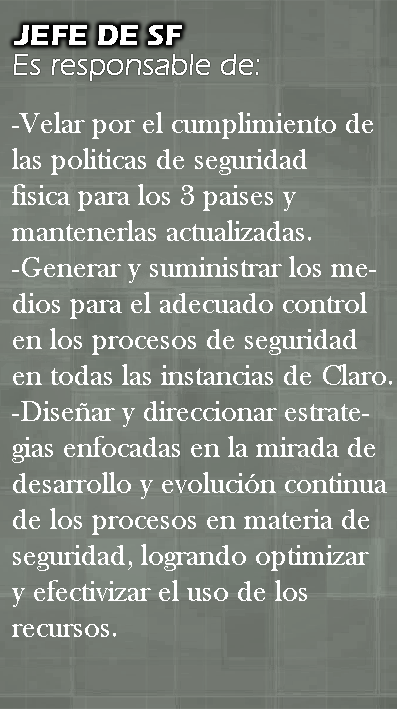
<style>
.page{position:relative;width:397px;height:709px}
.page>*{position:absolute;margin:0}
.t1{font:30px "ErasITC-Bold";color:#ffffff;text-transform:uppercase}
.t2{font:30px "BaskOldFace";color:#ffffff}
</style>
<div class="page">
<p class="t1" style="left:14px;top:25px;width:168px;height:20px">jefe de sf</p>
<p class="t2" style="left:12px;top:112px;width:380px;height:525px">-Velar por el cumplimiento de<br>las politicas de seguridad<br>fisica para los 3 paises y <br>mantenerlas actualizadas.<br>-Generar y suministrar los me-<br>dios para el adecuado control<br>en los procesos de seguridad<br>en todas las instancias de Claro.<br>-Diseñar y direccionar estrate-<br>gias enfocadas en la mirada de<br>desarrollo y evolución continua<br>de los procesos en materia de<br>seguridad, logrando optimizar<br>y efectivizar el uso de los<br>recursos.</p>
</div>
